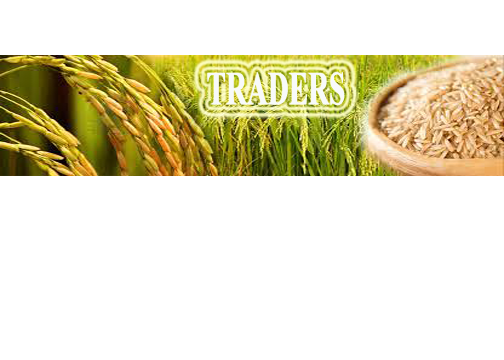
<style>
.page{position:relative;width:504px;height:360px;background:#ffffff}
.page>*{position:absolute;margin:0}
.t1{font:47.3px "TimesNewRomanPS-BoldMT";color:#f8fafa;scale:0.61 1}
</style>
<div class="page">
<p class="t1" style="left:207px;top:72px;width:138px;height:34px">TRADERS</p>
</div>
